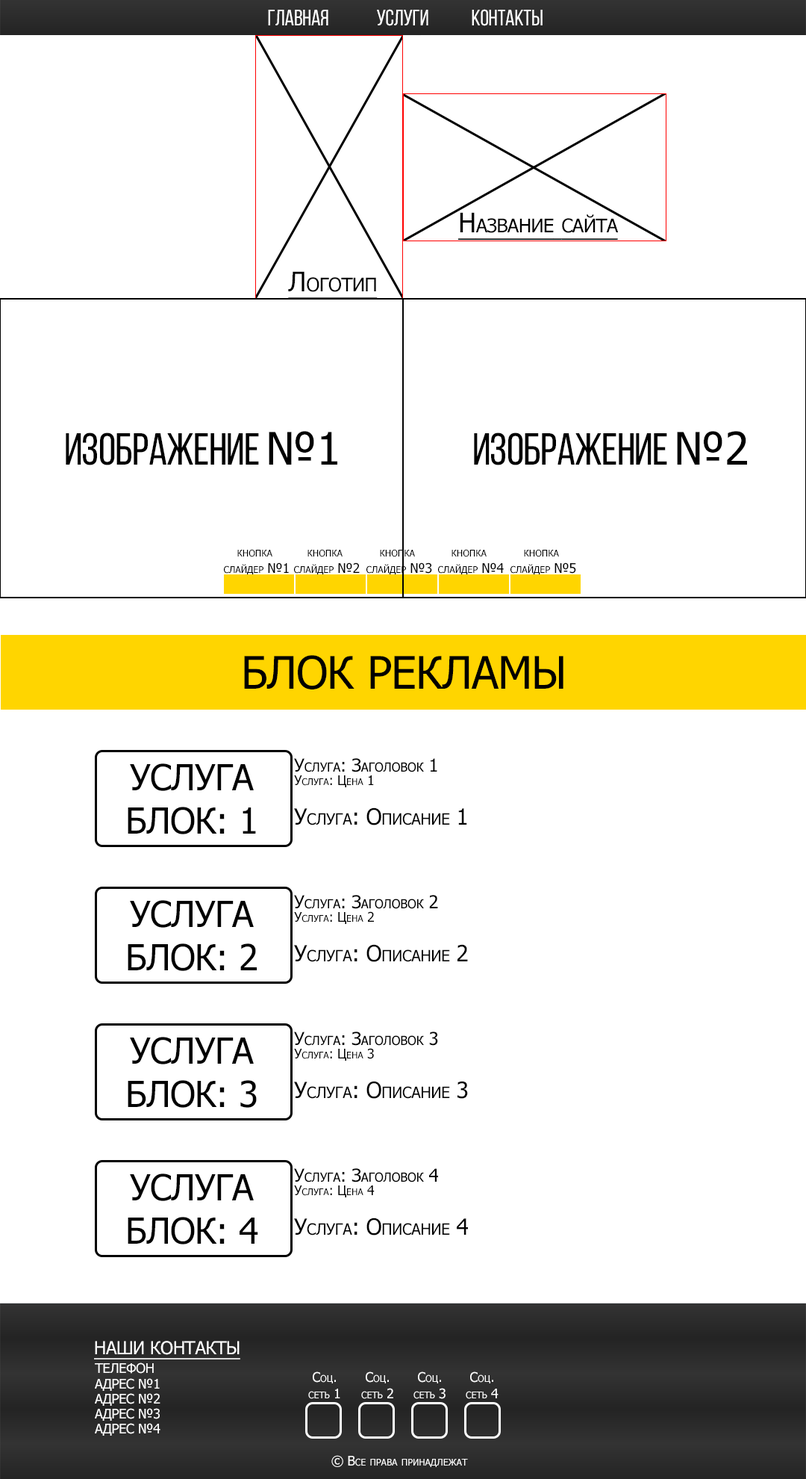
<style>
.page{position:relative;width:806px;height:1479px;background:#ffffff}
.page>*{position:absolute;margin:0}
.t1{font:22.4px "BebasNeueRegular";letter-spacing:-0.015em;color:#ffffff;text-transform:uppercase}
.t2{font:26.9px "Tahoma";letter-spacing:-0.015em;color:#000000;font-variant:small-caps;text-decoration:underline}
.t3{font:44.8px "BebasNeueRegular";letter-spacing:-0.015em;color:#000000;text-transform:uppercase}
.t4{font:44.8px "Tahoma";letter-spacing:-0.015em;color:#000000;text-transform:uppercase}
.t5{font:13.4px "Tahoma";letter-spacing:-0.015em;color:#000000;font-variant:small-caps}
.t6{font:17.9px "Tahoma";letter-spacing:-0.015em;color:#000000;font-variant:small-caps}
.t7{font:35.8px "Tahoma";letter-spacing:-0.015em;color:#000000;text-transform:uppercase}
.t8{font:22.4px "Tahoma";letter-spacing:-0.015em;color:#000000;font-variant:small-caps}
.t9{font:17.9px "Tahoma";letter-spacing:-0.015em;color:#ffffff;text-transform:uppercase;text-decoration:underline}
.t10{font:13.4px "Tahoma";letter-spacing:-0.015em;color:#ffffff;text-transform:uppercase}
.t11{font:13.4px "Tahoma";letter-spacing:-0.015em;color:#ffffff;font-variant:small-caps}
</style>
<div class="page">
<p class="t1" style="left:268px;top:10px;width:61px;height:15px">Главная</p>
<p class="t1" style="left:377px;top:9px;width:52px;height:17px">Услуги</p>
<p class="t1" style="left:472px;top:9px;width:71px;height:17px">Контакты</p>
<p class="t2" style="left:459px;top:212px;width:160px;height:28px">Название сайта</p>
<p class="t2" style="left:288px;top:271px;width:90px;height:28px">Логотип</p>
<p class="t3" style="left:66px;top:431px;width:272px;height:34px">Изображение <span class="t4">№1</span></p>
<p class="t3" style="left:474px;top:431px;width:273px;height:34px">Изображение <span class="t4">№2</span></p>
<p class="t5" style="left:224px;top:549px;width:65px;height:25px;text-align:center">кнопка <br>слайдер №1</p>
<p class="t5" style="left:294px;top:549px;width:66px;height:25px;text-align:center">кнопка <br>слайдер №2</p>
<p class="t5" style="left:367px;top:549px;width:65px;height:25px;text-align:center">кнопка <br>слайдер №3</p>
<p class="t5" style="left:438px;top:549px;width:66px;height:25px;text-align:center">кнопка <br>слайдер №4</p>
<p class="t5" style="left:511px;top:549px;width:65px;height:25px;text-align:center">кнопка <br>слайдер №5</p>
<p class="t4" style="left:244px;top:655px;width:320px;height:34px">Блок рекламы</p>
<p class="t6" style="left:294px;top:758px;width:144px;height:14px">Услуга: Заголовок 1</p>
<p class="t7" style="left:128px;top:763px;width:128px;height:71px;text-align:center">Услуга<br>БлоК: 1</p>
<p class="t5" style="left:294px;top:775px;width:80px;height:12px">Услуга: Цена 1</p>
<p class="t8" style="left:294px;top:807px;width:173px;height:18px">Услуга: Описание 1</p>
<p class="t7" style="left:128px;top:900px;width:129px;height:71px;text-align:center">Услуга<br>БлоК: 2</p>
<p class="t6" style="left:294px;top:895px;width:144px;height:14px">Услуга: Заголовок 2</p>
<p class="t5" style="left:294px;top:911px;width:80px;height:13px">Услуга: Цена 2</p>
<p class="t8" style="left:294px;top:944px;width:174px;height:18px">Услуга: Описание 2</p>
<p class="t7" style="left:128px;top:1036px;width:129px;height:71px;text-align:center">Услуга<br>БлоК: 3</p>
<p class="t6" style="left:294px;top:1031px;width:144px;height:14px">Услуга: Заголовок 3</p>
<p class="t5" style="left:294px;top:1048px;width:80px;height:12px">Услуга: Цена 3</p>
<p class="t8" style="left:294px;top:1081px;width:174px;height:17px">Услуга: Описание 3</p>
<p class="t6" style="left:294px;top:1168px;width:144px;height:14px">Услуга: Заголовок 4</p>
<p class="t7" style="left:128px;top:1173px;width:130px;height:71px;text-align:center">Услуга<br>БлоК: 4</p>
<p class="t5" style="left:294px;top:1185px;width:81px;height:12px">Услуга: Цена 4</p>
<p class="t8" style="left:294px;top:1217px;width:174px;height:18px">Услуга: Описание 4</p>
<p class="t9" style="left:94px;top:1340px;width:146px;height:19px">Наши контакты</p>
<p class="t10" style="left:95px;top:1362px;width:59px;height:11px">Телефон</p>
<p class="t11" style="left:308px;top:1371px;width:33px;height:28px;text-align:center">Соц.<br>сеть 1</p>
<p class="t11" style="left:361px;top:1371px;width:33px;height:28px;text-align:center">Соц.<br>сеть 2</p>
<p class="t11" style="left:414px;top:1371px;width:32px;height:28px;text-align:center">Соц.<br>сеть 3</p>
<p class="t11" style="left:466px;top:1371px;width:33px;height:28px;text-align:center">Соц.<br>сеть 4</p>
<p class="t10" style="left:95px;top:1378px;width:65px;height:12px">Адрес №1</p>
<p class="t10" style="left:95px;top:1393px;width:66px;height:12px">Адрес №2</p>
<p class="t10" style="left:95px;top:1408px;width:65px;height:12px">Адрес №3</p>
<p class="t10" style="left:95px;top:1423px;width:66px;height:12px">Адрес №4</p>
<p class="t11" style="left:332px;top:1455px;width:136px;height:12px">© Все права принадлежат</p>
</div>
